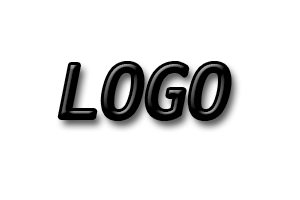
<style>
.page{position:relative;width:300px;height:200px;background:#ffffff}
.page>*{position:absolute;margin:0}
.t1{font:72px "Menlo-Italic"}
</style>
<div class="page">
<p class="t1" style="left:60px;top:64px;width:169px;height:54px">LOGO</p>
</div>
